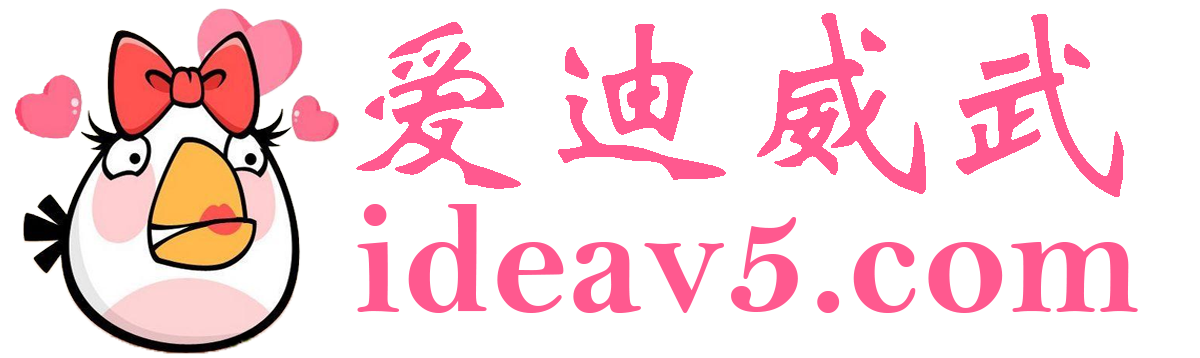
<style>
.page{position:relative;width:1200px;height:358px;background:#ffffff}
.page>*{position:absolute;margin:0}
.t1{font:200px "STXinwei";color:#ff598f}
.t2{font:160px "BellMTBold";color:#ff598f}
</style>
<div class="page">
<p class="t1" style="left:356px;top:13px;width:768px;height:184px">爱迪威武</p>
<p class="t2" style="left:357px;top:204px;width:781px;height:109px">ideav5.com</p>
</div>
